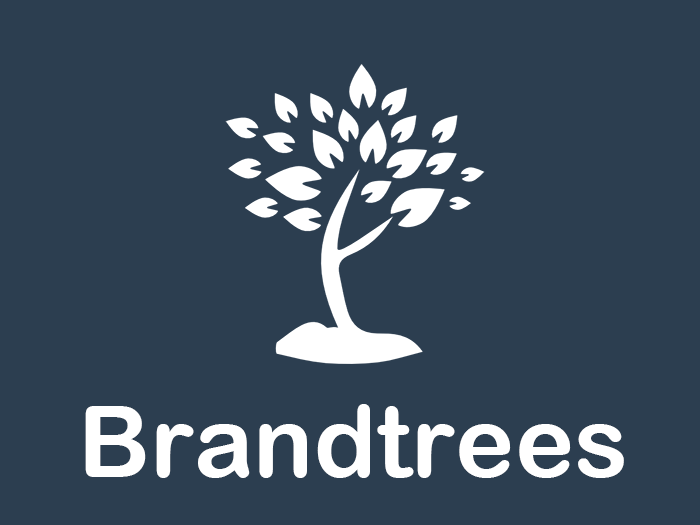
<style>
.page{position:relative;width:700px;height:525px;background:#2c3e50}
.page>*{position:absolute;margin:0}
.t1{font:100px "ArialRoundedMTBold";color:#ffffff}
</style>
<div class="page">
<p class="t1" style="left:85px;top:404px;width:539px;height:74px">Brandtrees</p>
</div>
